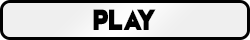
<style>
.page{position:relative;width:250px;height:40px;background:#efefef}
.page>*{position:absolute;margin:0}
.t1{font:30px "VampireRaves";color:#000000;scale:0.9 1}
</style>
<div class="page">
<p class="t1" style="left:93px;top:9px;width:63px;height:21px">PLAY</p>
</div>
